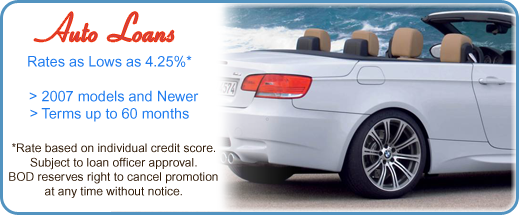
<style>
.page{position:relative;width:520px;height:216px;background:#ffffff}
.page>*{position:absolute;margin:0}
.t1{font:41px "Aspire-DemiBold";color:#d24143}
.t2{font:14.5px "ArialMT";color:#1e7bef}
.t3{font:12px "ArialMT";color:#2d1805}
</style>
<div class="page">
<p class="t1" style="left:34px;top:12px;width:140px;height:30px">Auto Loans</p>
<p class="t2" style="left:28px;top:55px;width:171px;height:67px;text-align:center">Rates as Lows as 4.25%*<br><br>  &gt; 2007 models and Newer<br>&gt; Terms up to 60 months</p>
<p class="t3" style="left:9px;top:143px;width:209px;height:55px;text-align:center">*Rate based on individual credit score. <br>Subject to loan officer approval. <br>BOD reserves right to cancel promotion <br>at any time without notice.</p>
</div>
